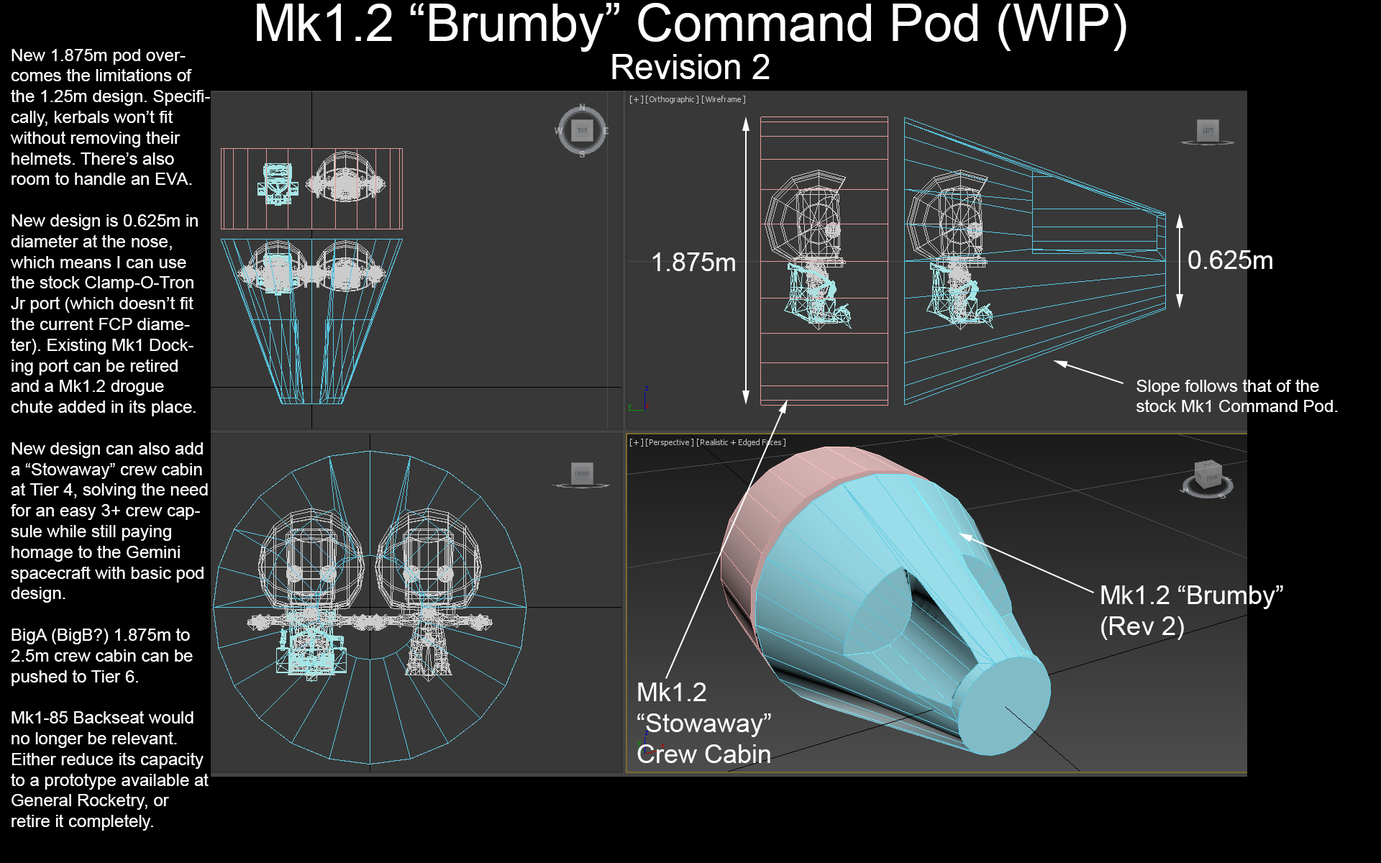
<style>
.page{position:relative;width:1381px;height:863px;background:#000000}
.page>*{position:absolute;margin:0}
.t1{font:51.8px "ArialMT";color:#ffffff}
.t2{font:17.3px "ArialMT";color:#ffffff}
.t3{font:34.5px "ArialMT";color:#ffffff}
.t4{font:25.9px "ArialMT";color:#ffffff}
</style>
<div class="page">
<p class="t1" style="left:257px;top:3px;width:870px;height:49px">Mk1.2 “Brumby” Command Pod (WIP)</p>
<p class="t2" style="left:10px;top:49px;width:200px;height:782px">New 1.875m pod overcomes the limitations of the 1.25m design. Specifically, kerbals won’t fit without removing their helmets. There’s also room to handle an EVA.<br><br>New design is 0.625m in diameter at the nose, which means I can use the stock Clamp-O-Tron Jr port (which doesn’t fit the current FCP diameter). Existing Mk1 Docking port can be retired and a Mk1.2 drogue chute added in its place.<br><br>New design can also add a “Stowaway” crew cabin at Tier 4, solving the need for an easy 3+ crew capsule while still paying homage to the Gemini spacecraft with basic pod design.<br><br>BigA (BigB?) 1.875m to 2.5m crew cabin can be pushed to Tier 6.<br><br>Mk1-85 Backseat would no longer be relevant. Either reduce its capacity to a prototype available at General Rocketry, or retire it completely.</p>
<p class="t3" style="left:612px;top:54px;width:158px;height:25px">Revision 2</p>
<p class="t4" style="left:653px;top:253px;width:82px;height:18px">1.875m</p>
<p class="t4" style="left:1188px;top:250px;width:85px;height:19px">0.625m</p>
<p class="t2" style="left:1137px;top:379px;width:201px;height:33px">Slope follows that of the<br>stock Mk1 Command Pod.</p>
<p class="t4" style="left:1101px;top:586px;width:182px;height:54px">Mk1.2 “Brumby”<br>(Rev 2)</p>
<p class="t4" style="left:637px;top:683px;width:134px;height:80px">Mk1.2<br>“Stowaway”<br>Crew Cabin</p>
</div>
